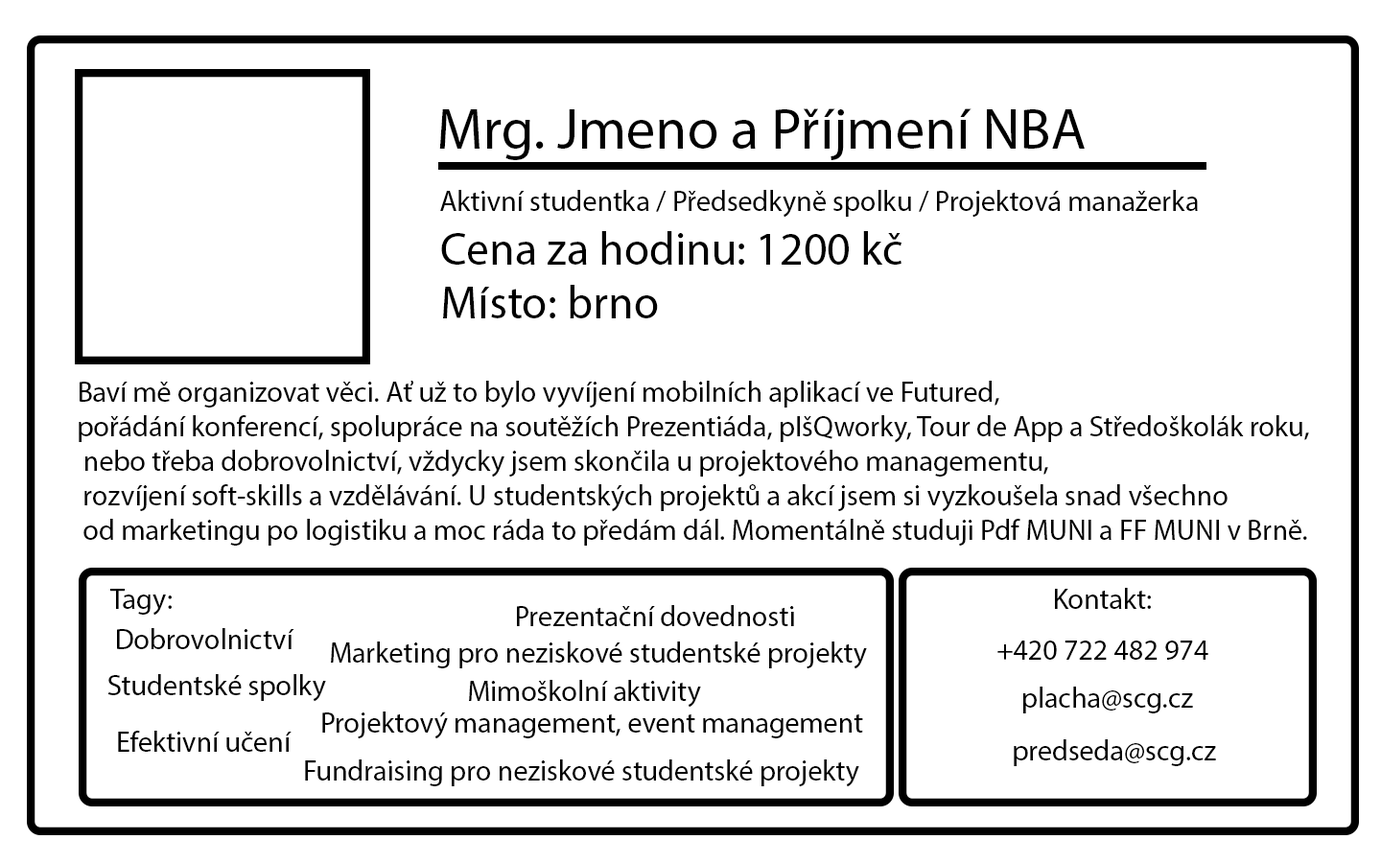
<style>
.page{position:relative;width:1381px;height:863px;background:#ffffff}
.page>*{position:absolute;margin:0}
.t1{font:57.6px "MyriadPro-Regular";color:#000000}
.t2{font:28.8px "MyriadPro-Regular";color:#000000}
.t3{font:46px "MyriadPro-Regular";color:#000000}
</style>
<div class="page">
<p class="t1" style="left:439px;top:108px;width:646px;height:52px">Mrg. Jmeno a Příjmení NBA</p>
<p class="t2" style="left:440px;top:190px;width:758px;height:28px">Aktivní studentka / Předsedkyně spolku / Projektová manažerka</p>
<p class="t3" style="left:441px;top:231px;width:461px;height:34px">Cena za hodinu: 1200 kč</p>
<p class="t3" style="left:443px;top:285px;width:215px;height:33px">Místo: brno</p>
<p class="t2" style="left:79px;top:381px;width:1230px;height:165px">Baví mě organizovat věci. Ať už to bylo vyvíjení mobilních aplikací ve Futured, <br>pořádání konferencí, spolupráce na soutěžích Prezentiáda, pIšQworky, Tour de App a Středoškolák roku,<br> nebo třeba dobrovolnictví, vždycky jsem skončila u projektového managementu,<br> rozvíjení soft-skills a vzdělávání. U studentských projektů a akcí jsem si vyzkoušela snad všechno<br> od marketingu po logistiku a moc ráda to předám dál. Momentálně studuji Pdf MUNI a FF MUNI v Brně.</p>
<p class="t2" style="left:110px;top:589px;width:62px;height:27px">Tagy:</p>
<p class="t2" style="left:1055px;top:588px;width:96px;height:21px">Kontakt:</p>
<p class="t2" style="left:517px;top:605px;width:277px;height:21px">Prezentační dovednosti</p>
<p class="t2" style="left:117px;top:628px;width:177px;height:21px">Dobrovolnictví</p>
<p class="t2" style="left:331px;top:642px;width:536px;height:28px">Marketing pro neziskové studentské projekty</p>
<p class="t2" style="left:998px;top:641px;width:211px;height:19px">+420 722 482 974</p>
<p class="t2" style="left:107px;top:674px;width:219px;height:28px">Studentské spolky</p>
<p class="t2" style="left:469px;top:680px;width:232px;height:28px">Mimoškolní aktivity</p>
<p class="t2" style="left:1023px;top:687px;width:170px;height:27px">placha@scg.cz</p>
<p class="t2" style="left:322px;top:712px;width:541px;height:28px">Projektový management, event management</p>
<p class="t2" style="left:118px;top:731px;width:174px;height:21px">Efektivní učení</p>
<p class="t2" style="left:1014px;top:740px;width:202px;height:26px">predseda@scg.cz</p>
<p class="t2" style="left:305px;top:760px;width:554px;height:28px">Fundraising pro neziskové studentské projekty</p>
</div>
